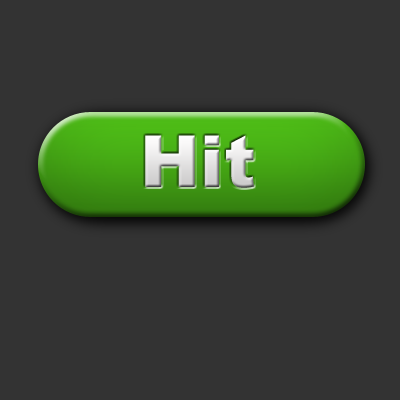
<style>
.page{position:relative;width:400px;height:400px;background:#333333}
.page>*{position:absolute;margin:0}
.t1{font:72px "Arial-Black"}
</style>
<div class="page">
<p class="t1" style="left:145px;top:135px;width:109px;height:53px">Hit</p>
</div>
